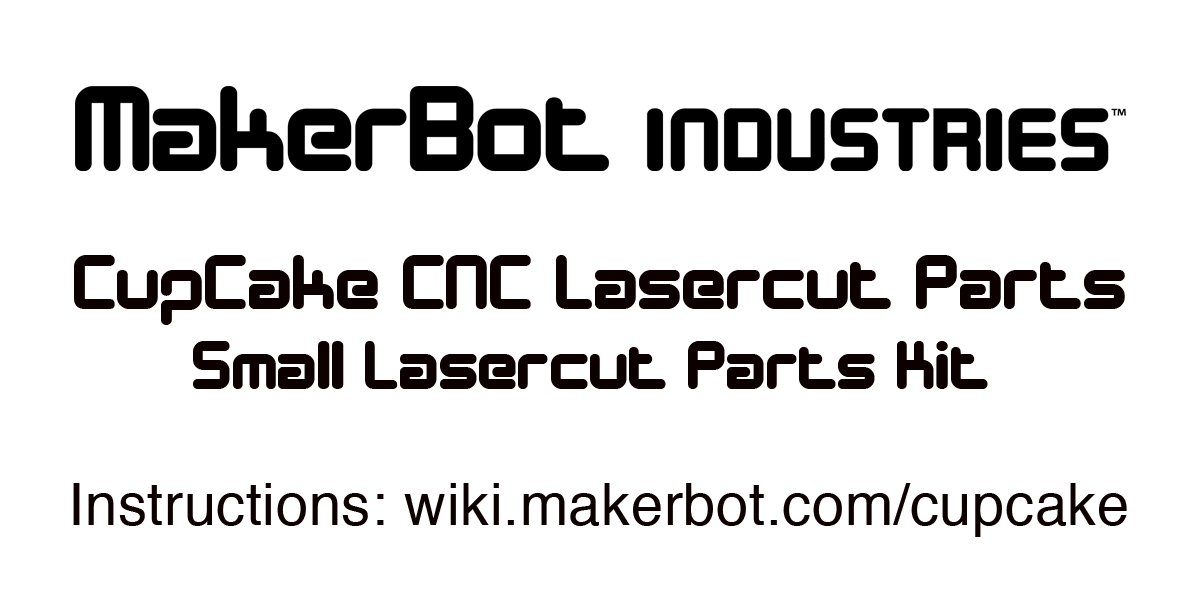
<style>
.page{position:relative;width:1200px;height:600px;background:#ffffff}
.page>*{position:absolute;margin:0}
.t1{font:79.1px "DesignerBlock";letter-spacing:0.01em;color:#0c0000}
.t2{font:70.9px "DesignerBlock";letter-spacing:0.01em;color:#0c0000}
.t3{font:57.9px "Helvetica";letter-spacing:0.01em;color:#0c0000}
</style>
<div class="page">
<p class="t1" style="left:74px;top:255px;width:1051px;height:70px">CupCake CNC Lasercut Parts</p>
<p class="t2" style="left:193px;top:341px;width:795px;height:48px">Small Lasercut Parts Kit</p>
<p class="t3" style="left:73px;top:483px;width:1054px;height:54px">Instructions: wiki.makerbot.com/cupcake</p>
</div>
